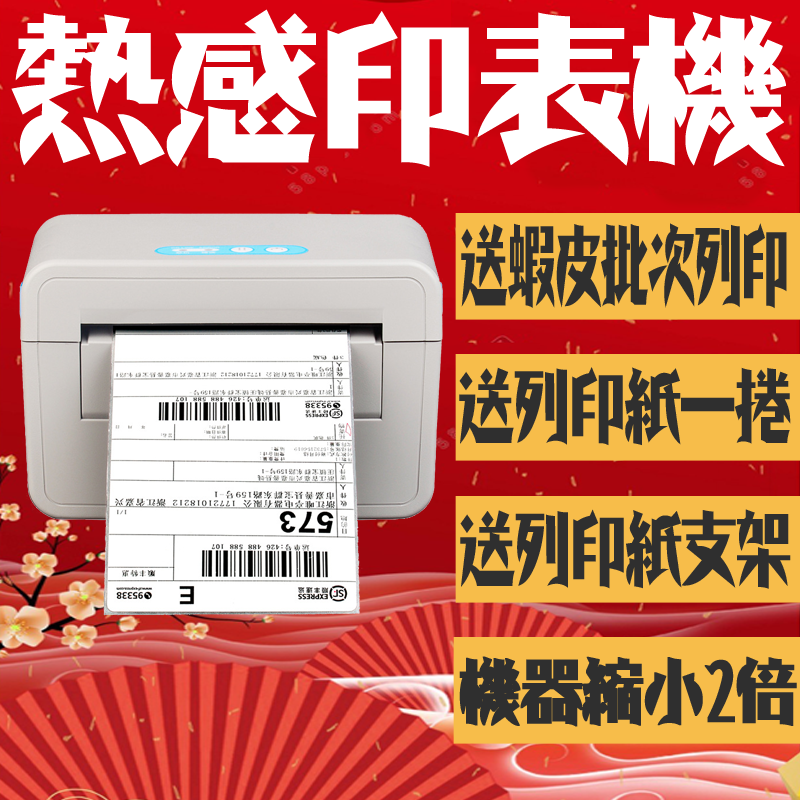
<style>
.page{position:relative;width:800px;height:800px}
.page>*{position:absolute;margin:0}
.t1{font:155.1px "ShowaModern";color:#ffffff}
.t2{font:84.8px "ShowaModern";color:#2f2f2f;scale:0.55 1}
.t3{font:78.2px "ShowaModern";color:#2f2f2f;scale:0.71 1}
.t4{font:78.9px "ShowaModern";color:#2f2f2f;scale:0.7 1}
.t5{font:69px "ShowaModern";color:#2f2f2f;font-weight:bold;scale:0.87 1}
</style>
<div class="page">
<p class="t1" style="left:11px;top:9px;width:775px;height:158px">熱感印表機</p>
<p class="t2" style="left:461px;top:223px;width:326px;height:86px">送蝦皮批次列印</p>
<p class="t3" style="left:459px;top:367px;width:332px;height:79px">送列印紙一捲</p>
<p class="t4" style="left:460px;top:509px;width:331px;height:80px">送列印紙支架</p>
<p class="t5" style="left:459px;top:656px;width:338px;height:71px">機器縮小2倍</p>
</div>
